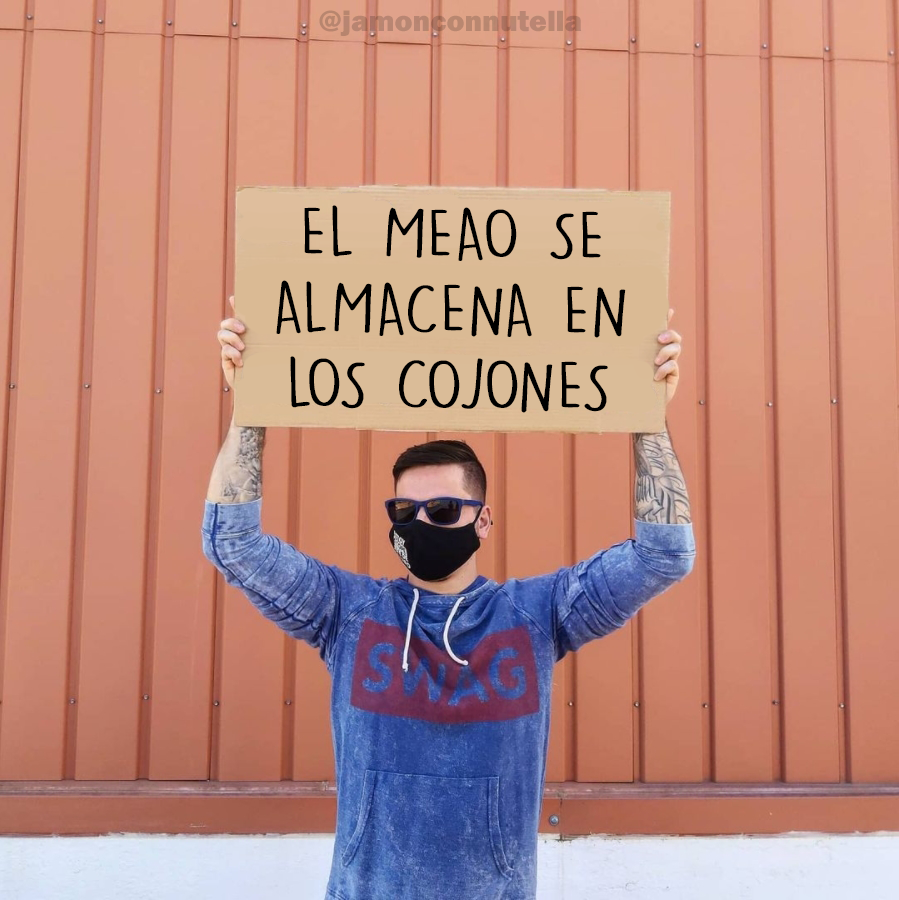
<style>
.page{position:relative;width:899px;height:900px}
.page>*{position:absolute;margin:0}
.t1{font:30.3px "FranklinGothic-Heavy";color:#b88670}
.t2{font:65.1px "DKLemonYellowSun";color:#000000;scale:1.33 1}
</style>
<div class="page">
<p class="t1" style="left:319px;top:10px;width:263px;height:26px">@jamonconnutella</p>
<p class="t2" style="left:276px;top:205px;width:350px;height:208px;text-align:center;rotate:1deg">EL MEAO SE<br>ALMACENA EN<br>LOS COJONES</p>
</div>
